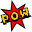
<style>
.page{position:relative;width:32px;height:32px;background:#ffffff}
.page>*{position:absolute;margin:0}
.t1{font:14px "Mario-Kart-DS";letter-spacing:-0.02em;color:#000000;text-decoration:underline}
</style>
<div class="page">
<p class="t1" style="left:0px;top:7px;width:31px;height:19px;rotate:-16deg">POW</p>
</div>
